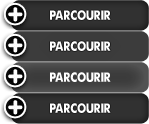
<style>
.page{position:relative;width:149px;height:124px}
.page>*{position:absolute;margin:0}
.t1{font:12px "abug'slife-debugged-Regular";letter-spacing:0.025em;color:#ffffff;text-transform:uppercase}
</style>
<div class="page">
<p class="t1" style="left:50px;top:10px;width:61px;height:10px">PARCOURIR</p>
<p class="t1" style="left:50px;top:41px;width:61px;height:10px">PARCOURIR</p>
<p class="t1" style="left:50px;top:72px;width:61px;height:10px">PARCOURIR</p>
<p class="t1" style="left:50px;top:103px;width:61px;height:10px">PARCOURIR</p>
</div>
